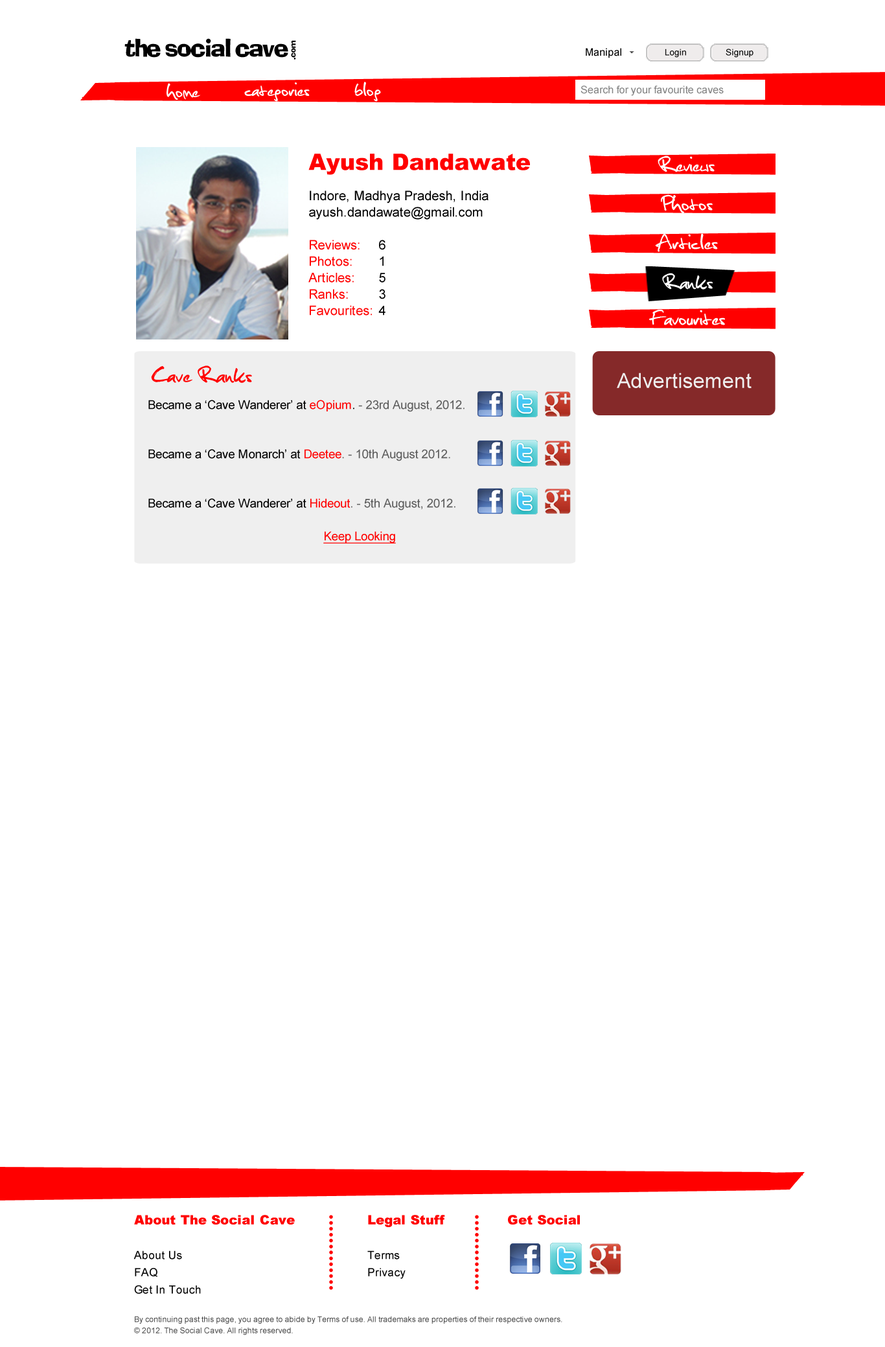
<style>
.page{position:relative;width:885px;height:1347px;background:#ffffff}
.page>*{position:absolute;margin:0}
.t1{font:25.9px "Christopherhand";letter-spacing:0.005em;color:#ffffff}
.t2{font:13px/16.4px "ArialMT";letter-spacing:0.005em;color:#000000}
.t3{font:22.5px/13.8px "Arial-Black";letter-spacing:0.005em;color:#ff0000}
.t4{font:13px/16.4px "ArialMT";letter-spacing:0.005em;color:#ff0000}
.t5{font:28.5px "Christopherhand";letter-spacing:0.005em;color:#ffffff}
.t6{font:30.2px "Christopherhand";letter-spacing:0.005em;color:#ff0000}
.t7{font:12.1px/16.4px "ArialMT";letter-spacing:0.005em;color:#000000}
.t8{font:12.1px/16.4px "ArialMT";letter-spacing:0.005em;color:#ff0000}
.t9{font:12.1px/16.4px "ArialMT";letter-spacing:0.005em;color:#5e5e5e}
.t10{font:12.1px/16.4px "ArialMT";letter-spacing:0.005em;color:#ff0000;text-decoration:underline}
.t11{font:7.8px/11.2px "ArialMT";letter-spacing:0.005em;color:#454545}
.t12{font:13px/17.3px "Arial-Black";letter-spacing:0.005em;color:#ff0000}
.t13{font:11.2px/17.3px "ArialMT";letter-spacing:0.005em;color:#000000}
</style>
<div class="page">
<p class="t1" style="left:167px;top:83px;width:33px;height:17px">home</p>
<p class="t1" style="left:244px;top:82px;width:66px;height:20px">categories</p>
<p class="t1" style="left:354px;top:82px;width:27px;height:20px">blog</p>
<p class="t2" style="left:308px;top:154px;width:222px;height:162px"><span class="t3">Ayush Dandawate<br><br></span>Indore, Madhya Pradesh, India<br>ayush.dandawate@gmail.com<br><br><span class="t4">Reviews:</span>  6<br><span class="t4">Photos:</span>  1<br><span class="t4">Articles: </span> 5<br><span class="t4">Ranks:</span>  3<br><span class="t4">Favourites:</span> 4</p>
<p class="t5" style="left:658px;top:156px;width:57px;height:16px">Reviews</p>
<p class="t5" style="left:661px;top:194px;width:52px;height:19px">Photos</p>
<p class="t5" style="left:655px;top:233px;width:63px;height:19px">Articles</p>
<p class="t5" style="left:662px;top:273px;width:51px;height:17px">Ranks</p>
<p class="t5" style="left:649px;top:309px;width:76px;height:17px">Favourites</p>
<p class="t6" style="left:151px;top:365px;width:101px;height:18px">Cave Ranks</p>
<p class="t7" style="left:148px;top:400px;width:317px;height:144px">Became a ‘Cave Wanderer’ at <span class="t8">eOpium</span>. <span class="t9">- 23rd August, 2012.<br><br><br></span>Became a ‘Cave Monarch’ at <span class="t8">Deetee</span><span class="t9">. - 10th August 2012.<br><br><br></span>Became a ‘Cave Wanderer’ at <span class="t8">Hideout</span><span class="t9">. - 5th August, 2012.<br><br></span><span class="t10">Keep Looking</span></p>
<p class="t11" style="left:133px;top:1215px;width:447px;height:120px"><span class="t12">About The Social Cave    Legal Stuff   Get Social<br><br></span><span class="t13">About Us        Terms<br>FAQ         Privacy<br>Get In Touch<br><br></span>By continuing past this page, you agree to abide by Terms of use. All trademaks are properties of their respective owners.<br>© 2012. The Social Cave. All rights reserved.</p>
</div>
